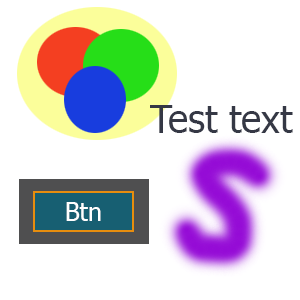
<style>
.page{position:relative;width:300px;height:300px;background:#ffffff}
.page>*{position:absolute;margin:0}
.t1{font:37.5px "Tahoma";color:#353845}
.t2{font:25px "Tahoma";color:#ffffff}
</style>
<div class="page">
<p class="t1" style="left:150px;top:105px;width:143px;height:28px">Test text</p>
<p class="t2" style="left:66px;top:202px;width:35px;height:19px">Btn</p>
</div>
